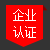
<style>
.page{position:relative;width:50px;height:50px;background:#ff0000}
.page>*{position:absolute;margin:0}
.t1{font:12px/17px "SimSun";color:#ffffff}
</style>
<div class="page">
<p class="t1" style="left:13px;top:9px;width:23px;height:29px">企业<br>认证</p>
</div>
